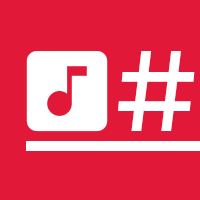
<style>
.page{position:relative;width:200px;height:200px;background:#e11838}
.page>*{position:absolute;margin:0}
.t1{font:114px "Montserrat-Regular";color:#ffffff}
</style>
<div class="page">
<p class="t1" style="left:118px;top:51px;width:77px;height:80px">#</p>
</div>
